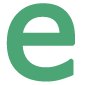
<style>
.page{position:relative;width:85px;height:85px;background:#ffffff}
.page>*{position:absolute;margin:0}
.t1{font:130px "Verdana";letter-spacing:0.05em;color:#4ba575;font-weight:bold}
</style>
<div class="page">
<p class="t1" style="left:6px;top:3px;width:69px;height:79px">e</p>
</div>
